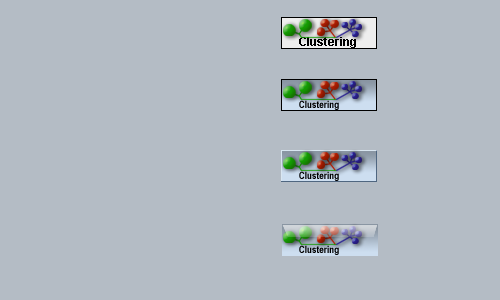
<style>
.page{position:relative;width:500px;height:300px;background:#b4bcc5}
.page>*{position:absolute;margin:0}
.t1{font:12px "Arial-BoldMT";color:#000000}
.t2{font:10px "ArialNarrow-Bold";color:#000000}
</style>
<div class="page">
<p class="t1" style="left:299px;top:37px;width:57px;height:11px">Clustering</p>
<p class="t2" style="left:299px;top:100px;width:40px;height:10px">Clustering</p>
<p class="t2" style="left:299px;top:171px;width:40px;height:10px">Clustering</p>
<p class="t2" style="left:299px;top:245px;width:40px;height:10px">Clustering</p>
</div>
